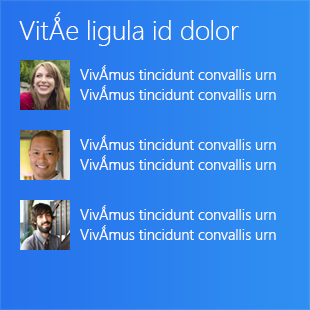
<style>
.page{position:relative;width:310px;height:310px}
.page>*{position:absolute;margin:0}
.t1{font:26.7px "SegoeUI-Light";color:#ffffff}
.t2{font:14.7px "SegoeUI-Semilight";color:#ffffff}
</style>
<div class="page">
<p class="t1" style="left:19px;top:12px;width:220px;height:34px">VitǺe ligula id dolor</p>
<p class="t2" style="left:80px;top:65px;width:196px;height:15px">VivǺmus tincidunt convallis urn</p>
<p class="t2" style="left:80px;top:85px;width:196px;height:15px">VivǺmus tincidunt convallis urn</p>
<p class="t2" style="left:80px;top:135px;width:196px;height:15px">VivǺmus tincidunt convallis urn</p>
<p class="t2" style="left:80px;top:155px;width:196px;height:15px">VivǺmus tincidunt convallis urn</p>
<p class="t2" style="left:80px;top:205px;width:196px;height:15px">VivǺmus tincidunt convallis urn</p>
<p class="t2" style="left:80px;top:225px;width:196px;height:15px">VivǺmus tincidunt convallis urn</p>
</div>
